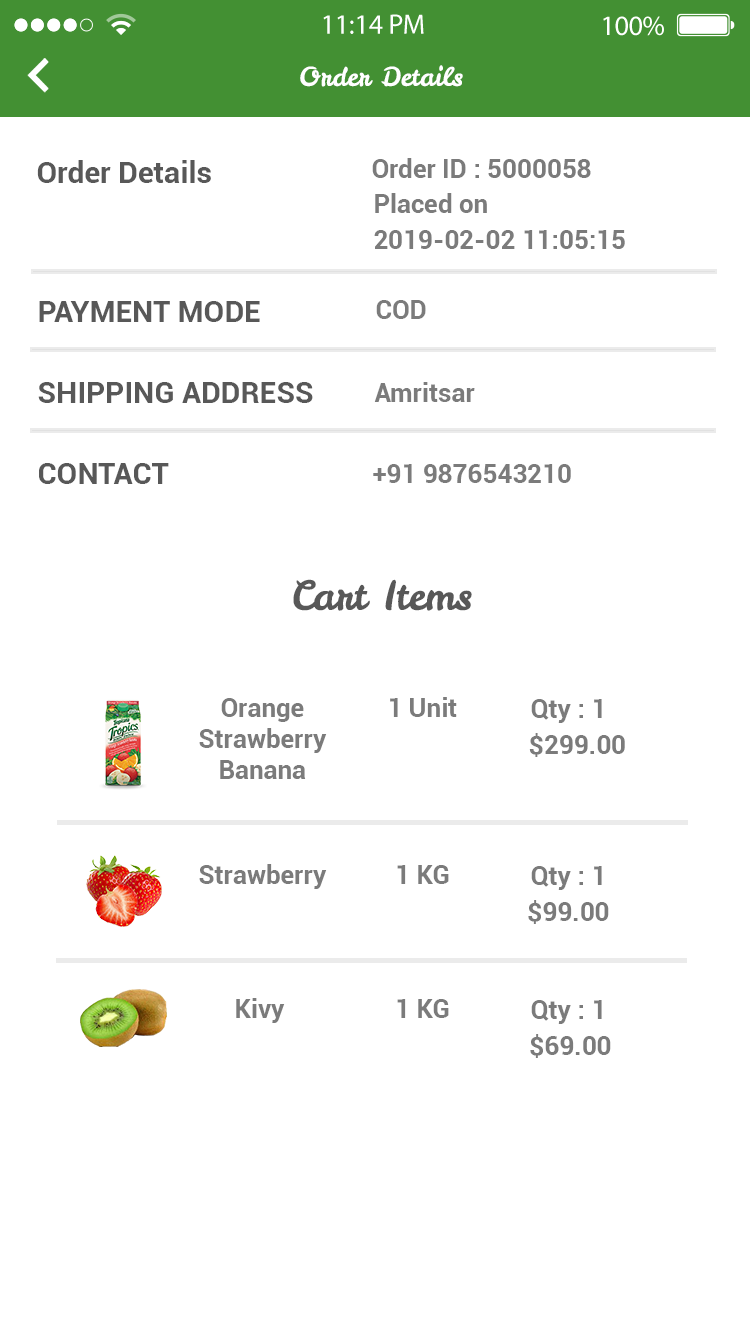
<style>
.page{position:relative;width:750px;height:1334px;background:#ffffff}
.page>*{position:absolute;margin:0}
.t1{font:26px "LeckerliOne-Regular";color:#ffffff}
.t2{font:30px "Roboto-Bold";color:#585858}
.t3{font:26px "Roboto-Bold";color:#7b7b7b}
.t4{font:40px "LeckerliOne-Regular";color:#585858}
</style>
<div class="page">
<p class="t1" style="left:300px;top:65px;width:163px;height:22px">Order Details</p>
<p class="t2" style="left:37px;top:160px;width:174px;height:23px">Order Details</p>
<p class="t3" style="left:372px;top:158px;width:219px;height:20px">Order ID : 5000058</p>
<p class="t3" style="left:375px;top:193px;width:112px;height:20px">Placed on</p>
<p class="t3" style="left:374px;top:230px;width:251px;height:19px">2019-02-02 11:05:15</p>
<p class="t2" style="left:39px;top:301px;width:221px;height:21px">PAYMENT MODE</p>
<p class="t3" style="left:376px;top:300px;width:50px;height:19px">COD</p>
<p class="t2" style="left:38px;top:382px;width:275px;height:21px">SHIPPING ADDRESS</p>
<p class="t3" style="left:374px;top:382px;width:101px;height:20px">Amritsar</p>
<p class="t2" style="left:39px;top:463px;width:130px;height:21px">CONTACT</p>
<p class="t3" style="left:373px;top:464px;width:198px;height:19px">+91 9876543210</p>
<p class="t4" style="left:293px;top:579px;width:179px;height:32px">Cart Items</p>
<p class="t3" style="left:199px;top:698px;width:128px;height:81px;text-align:center">Orange<br>Strawberry<br>Banana</p>
<p class="t3" style="left:390px;top:697px;width:67px;height:20px">1 Unit</p>
<p class="t3" style="left:531px;top:699px;width:71px;height:24px">Qty : 1</p>
<p class="t3" style="left:529px;top:733px;width:96px;height:24px">$299.00</p>
<p class="t3" style="left:199px;top:864px;width:128px;height:25px">Strawberry</p>
<p class="t3" style="left:397px;top:865px;width:52px;height:19px">1 KG</p>
<p class="t3" style="left:531px;top:866px;width:71px;height:24px">Qty : 1</p>
<p class="t3" style="left:528px;top:900px;width:81px;height:24px">$99.00</p>
<p class="t3" style="left:236px;top:998px;width:49px;height:25px">Kivy</p>
<p class="t3" style="left:397px;top:999px;width:52px;height:19px">1 KG</p>
<p class="t3" style="left:531px;top:1000px;width:71px;height:24px">Qty : 1</p>
<p class="t3" style="left:530px;top:1034px;width:81px;height:24px">$69.00</p>
</div>
